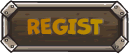
<style>
.page{position:relative;width:130px;height:54px}
.page>*{position:absolute;margin:0}
.t1{font:20px "MarvinRound";color:#b88000;font-variant:small-caps}
</style>
<div class="page">
<p class="t1" style="left:27px;top:18px;width:76px;height:17px">REGIST</p>
</div>
